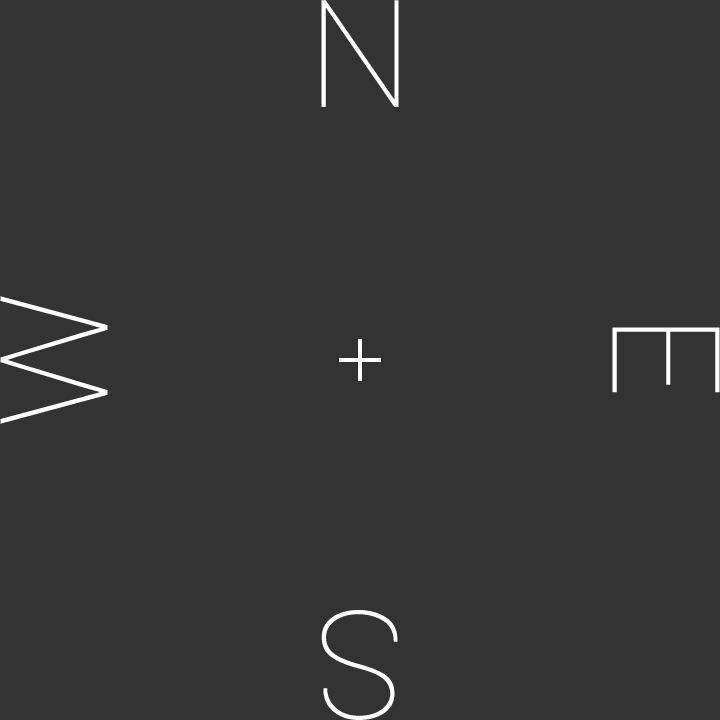
<style>
.page{position:relative;width:720px;height:720px;background:#333333}
.page>*{position:absolute;margin:0}
.t1{font:150px "Roboto-Thin";color:#ffffff}
</style>
<div class="page">
<p class="t1" style="left:321px;top:0px;width:78px;height:107px">N</p>
<p class="t1" style="left:0px;top:296px;width:108px;height:128px;rotate:-90deg">W</p>
<p class="t1" style="left:612px;top:327px;width:108px;height:66px;rotate:90deg">E</p>
<p class="t1" style="left:321px;top:610px;width:77px;height:110px;rotate:180deg">S</p>
</div>
